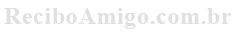
<style>
.page{position:relative;width:237px;height:33px;background:#ffffff}
.page>*{position:absolute;margin:0}
.t1{font:24.2px "TimesNewRomanPS-BoldMT";letter-spacing:0.025em;color:#e0e0e0}
</style>
<div class="page">
<p class="t1" style="left:4px;top:8px;width:228px;height:21px">ReciboAmigo.com.br</p>
</div>
